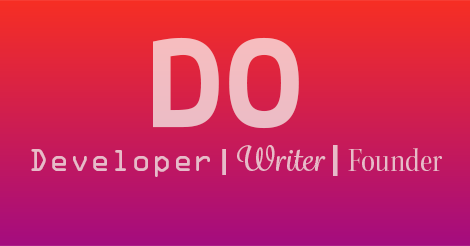
<style>
.page{position:relative;width:470px;height:246px}
.page>*{position:absolute;margin:0}
.t1{font:126px "EnzoOT-Bold";color:#f1bcc2;scale:0.91 1}
.t2{font:27.9px "OCRAStd";color:#e7bbc9}
.t3{font:27.9px "EnzoOT-Bold";color:#e7bbc9}
.t4{font:33.3px "GrafolitaScript-Medium";color:#e7bbc9}
.t5{font:33.3px "EnzoOT-Bold";color:#e7bbc9}
.t6{font:33.3px "KeplerStd-ScnDisp";color:#e7bbc9}
</style>
<div class="page">
<p class="t1" style="left:153px;top:37px;width:146px;height:92px">DO</p>
<p class="t2" style="left:31px;top:145px;width:411px;height:32px">Developer<span class="t3"> | </span><span class="t4">Writer </span><span class="t5">| </span><span class="t6">Founder</span></p>
</div>
